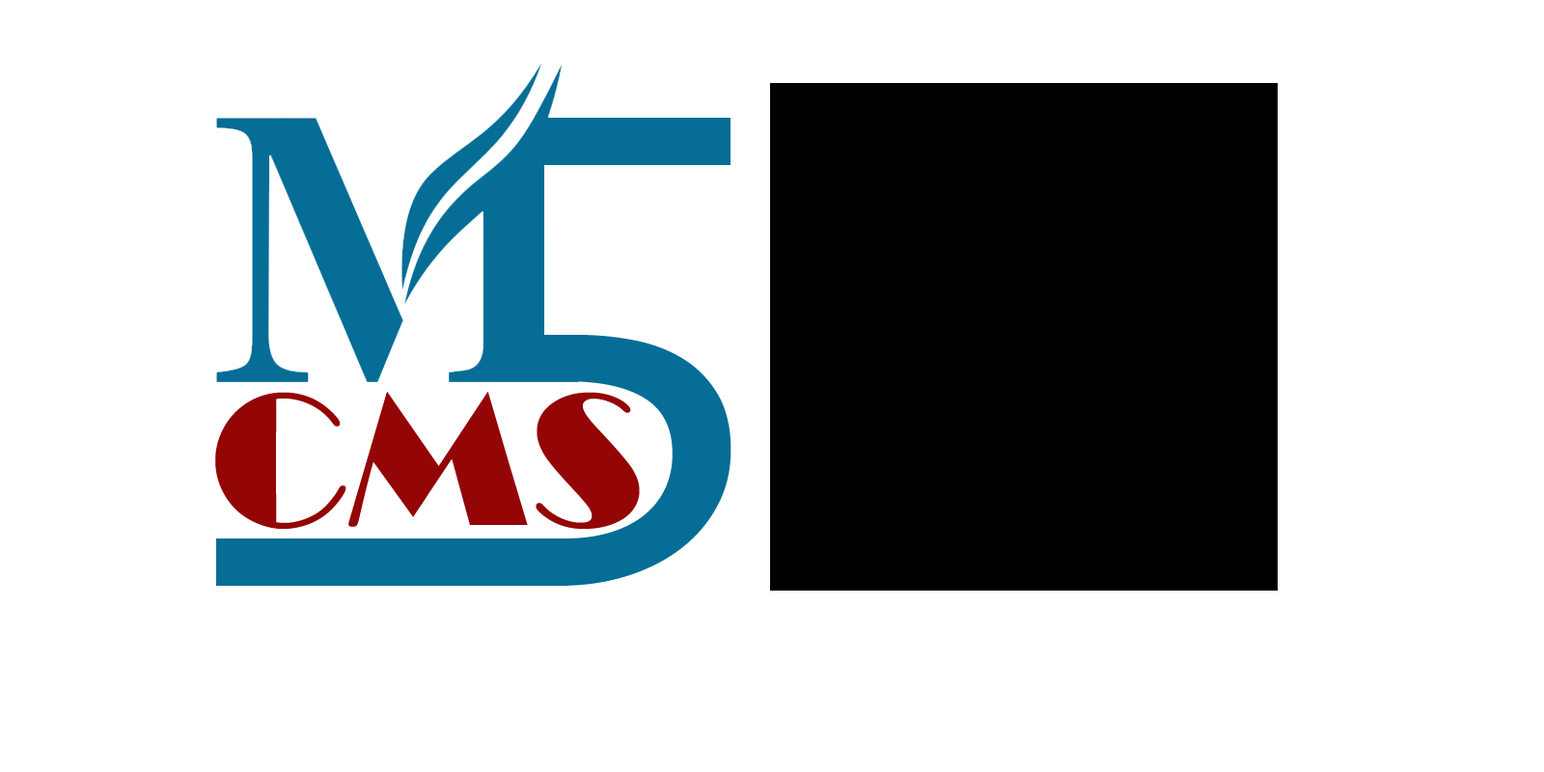
<style>
.page{position:relative;width:1544px;height:772px;background:#ffffff}
.page>*{position:absolute;margin:0}
.t1{font:637px "Consolas";color:#056d96;text-transform:uppercase}
.t2{font:193px "Broadway";color:#940505}
</style>
<div class="page">
<p class="t1" style="left:483px;top:173px;width:249px;height:413px">5</p>
<p class="t2" style="left:215px;top:392px;width:425px;height:137px">CMS</p>
</div>
